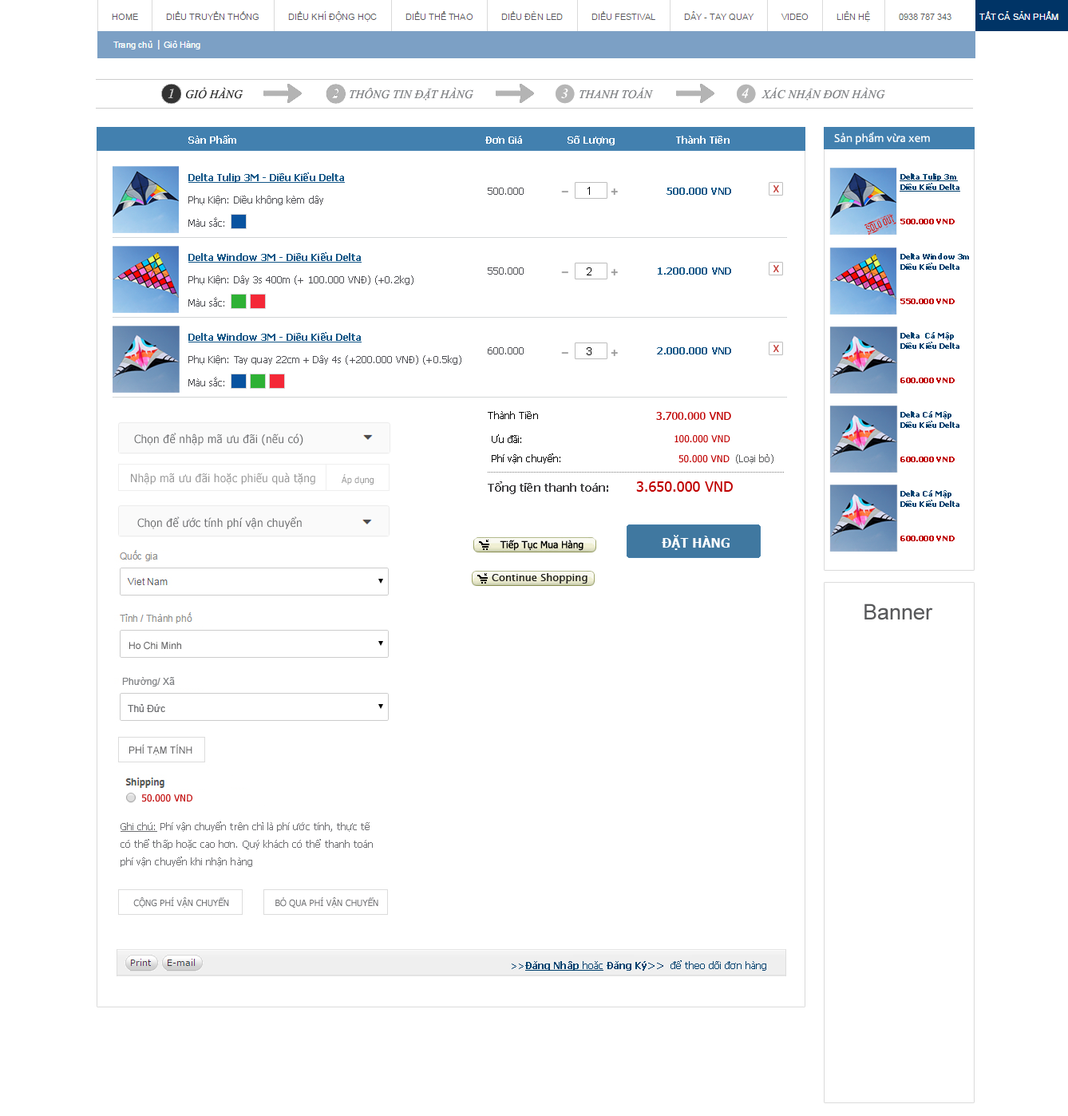
<style>
.page{position:relative;width:1068px;height:1116px;background:#ffffff}
.page>*{position:absolute;margin:0}
.t1{font:12px "TimesNewRomanPS-ItalicMT";letter-spacing:0.005em;color:#333333}
.t2{font:12px "TimesNewRomanPS-ItalicMT";letter-spacing:0.005em;color:#808285}
.t3{font:14.4px "TimesNewRomanPS-ItalicMT";letter-spacing:0.005em;color:#ffffff}
.t4{font:9.6px "Tahoma-Bold";letter-spacing:0.005em;color:#ffffff}
.t5{font:12px "Candara";color:#ffffff}
.t6{font:9.6px "Tahoma-Bold";letter-spacing:0.005em;color:#125687;text-decoration:underline}
.t7{font:8px/10.4px "Tahoma-Bold";letter-spacing:0.005em;color:#00406e;text-decoration:underline}
.t8{font:9.6px "Tahoma";letter-spacing:0.005em;color:#4d4e53}
.t9{font:11.2px "ArialMT";letter-spacing:0.005em;color:#000000}
.t10{font:9.6px "Tahoma-Bold";letter-spacing:0.005em;color:#125687}
.t11{font:8.1px "Tahoma-Bold";letter-spacing:0.005em;color:#bf0000}
.t12{font:8px/10.4px "Tahoma-Bold";letter-spacing:0.005em;color:#00406e}
.t13{font:9.6px "Tahoma";letter-spacing:0.005em;color:#000000}
.t14{font:11.2px "Tahoma";letter-spacing:0.005em;color:#bf0000}
.t15{font:9.6px "Tahoma";letter-spacing:0.005em;color:#bf0000}
.t16{font:9.6px "Tahoma";letter-spacing:0.005em;color:#58595b}
.t17{font:11.2px "Tahoma-Bold";letter-spacing:0.005em;color:#414042}
.t18{font:14.4px "Tahoma";letter-spacing:0.005em;color:#bf0000}
.t19{font:12.8px "Tahoma-Bold";letter-spacing:0.005em;color:#ffffff}
.t20{font:21.3px "ArialMT";letter-spacing:0.005em;color:#58595b}
.t21{font:9.6px/17.6px "Tahoma";letter-spacing:0.005em;color:#6d6e71}
.t22{font:9.6px/17.6px "Tahoma";letter-spacing:0.005em;color:#6d6e71;text-decoration:underline}
.t23{font:8.8px "Tahoma";letter-spacing:0.005em;color:#6d6e71}
.t24{font:9.6px "Tahoma";letter-spacing:0.005em;color:#00406e}
.t25{font:9.6px "Tahoma-Bold";letter-spacing:0.005em;color:#00406e;text-decoration:underline}
.t26{font:9.6px "Tahoma";letter-spacing:0.005em;color:#00406e;text-decoration:underline}
.t27{font:9.6px "Tahoma-Bold";letter-spacing:0.005em;color:#00406e}
</style>
<div class="page">
<p class="t1" style="left:186px;top:87px;width:57px;height:12px">GIỎ HÀNG</p>
<p class="t2" style="left:350px;top:87px;width:123px;height:14px">THÔNG TIN ĐẶT HÀNG</p>
<p class="t2" style="left:580px;top:87px;width:74px;height:12px">THANH TOÁN</p>
<p class="t3" style="left:742px;top:88px;width:7px;height:10px">4</p>
<p class="t2" style="left:761px;top:87px;width:124px;height:14px">XÁC NHẬN ĐƠN HÀNG</p>
<p class="t4" style="left:188px;top:135px;width:48px;height:9px">Sản Phẩm</p>
<p class="t4" style="left:485px;top:136px;width:37px;height:8px">Đơn Giá</p>
<p class="t4" style="left:568px;top:136px;width:47px;height:9px">Số Lượng</p>
<p class="t4" style="left:676px;top:136px;width:54px;height:8px">Thành Tiền</p>
<p class="t5" style="left:834px;top:132px;width:96px;height:13px">Sản phẩm vừa xem</p>
<p class="t6" style="left:188px;top:172px;width:157px;height:11px">Delta Tulip 3M - Diều Kiểu Delta</p>
<p class="t7" style="left:900px;top:173px;width:61px;height:19px">Delta Tulip 3m<br>Diều Kiểu Delta</p>
<p class="t8" style="left:188px;top:196px;width:135px;height:9px">Phụ Kiện: Diều không kèm dây</p>
<p class="t8" style="left:488px;top:188px;width:36px;height:7px">500.000</p>
<p class="t9" style="left:588px;top:187px;width:2px;height:8px">1</p>
<p class="t10" style="left:667px;top:188px;width:64px;height:7px">500.000 VND</p>
<p class="t8" style="left:188px;top:217px;width:36px;height:10px">Màu sắc:</p>
<p class="t11" style="left:901px;top:219px;width:54px;height:5px">500.000 VND</p>
<p class="t6" style="left:188px;top:252px;width:174px;height:11px">Delta Window 3M - Diều Kiểu Delta</p>
<p class="t12" style="left:901px;top:253px;width:68px;height:17px">Delta Window 3m<br>Diều Kiểu Delta</p>
<p class="t8" style="left:488px;top:267px;width:36px;height:8px">550.000</p>
<p class="t9" style="left:587px;top:267px;width:5px;height:8px">2</p>
<p class="t10" style="left:658px;top:267px;width:73px;height:8px">1.200.000 VND</p>
<p class="t8" style="left:188px;top:275px;width:226px;height:10px">Phụ Kiện: Dây 3s 400m (+ 100.000 VNĐ) (+0.2kg)</p>
<p class="t8" style="left:188px;top:297px;width:36px;height:10px">Màu sắc:</p>
<p class="t11" style="left:901px;top:299px;width:54px;height:5px">550.000 VND</p>
<p class="t6" style="left:188px;top:332px;width:174px;height:11px">Delta Window 3M - Diều Kiểu Delta</p>
<p class="t12" style="left:901px;top:332px;width:59px;height:17px">Delta  Cá Mập<br>Diều Kiểu Delta</p>
<p class="t8" style="left:488px;top:347px;width:36px;height:8px">600.000</p>
<p class="t9" style="left:587px;top:347px;width:5px;height:8px">3</p>
<p class="t10" style="left:657px;top:347px;width:74px;height:8px">2.000.000 VND</p>
<p class="t8" style="left:188px;top:355px;width:273px;height:10px">Phụ Kiện: Tay quay 22cm + Dây 4s (+200.000 VNĐ) (+0.5kg)</p>
<p class="t8" style="left:188px;top:377px;width:36px;height:9px">Màu sắc:</p>
<p class="t11" style="left:901px;top:378px;width:54px;height:5px">600.000 VND</p>
<p class="t13" style="left:488px;top:411px;width:50px;height:8px">Thành Tiền</p>
<p class="t14" style="left:656px;top:412px;width:75px;height:8px">3.700.000 VND</p>
<p class="t12" style="left:901px;top:411px;width:59px;height:17px">Delta Cá Mập<br>Diều Kiểu Delta</p>
<p class="t13" style="left:492px;top:434px;width:29px;height:9px">Ưu đãi:</p>
<p class="t15" style="left:675px;top:435px;width:56px;height:8px">100.000 VND</p>
<p class="t13" style="left:492px;top:454px;width:68px;height:10px">Phí vận chuyển:</p>
<p class="t15" style="left:679px;top:455px;width:51px;height:8px">50.000 VND</p>
<p class="t16" style="left:736px;top:454px;width:38px;height:10px">(Loại bỏ)</p>
<p class="t11" style="left:901px;top:457px;width:54px;height:5px">600.000 VND</p>
<p class="t17" style="left:488px;top:481px;width:120px;height:13px">Tổng tiền thanh toán:</p>
<p class="t18" style="left:636px;top:481px;width:97px;height:11px">3.650.000 VND</p>
<p class="t12" style="left:901px;top:490px;width:59px;height:17px">Delta Cá Mập<br>Diều Kiểu Delta</p>
<p class="t19" style="left:662px;top:535px;width:68px;height:15px">ĐẶT HÀNG</p>
<p class="t11" style="left:901px;top:536px;width:54px;height:5px">600.000 VND</p>
<p class="t20" style="left:865px;top:604px;width:68px;height:16px">Banner</p>
<p class="t15" style="left:142px;top:794px;width:50px;height:8px">50.000 VND</p>
<p class="t21" style="left:121px;top:822px;width:252px;height:45px"><span class="t22">Ghi chú:</span> Phí vận chuyển trên chỉ là phí ước tính, thực tế<br>có thể thấp hoặc cao hơn. Quý khách có thể thanh toán<br>phí vận chuyển khi nhận hàng</p>
<p class="t23" style="left:133px;top:897px;width:96px;height:11px">CỘNG PHÍ VẬN CHUYỂN</p>
<p class="t23" style="left:275px;top:897px;width:103px;height:11px">BỎ QUA PHÍ VẬN CHUYỂN</p>
<p class="t24" style="left:512px;top:961px;width:254px;height:10px">&gt;&gt;<span class="t25">Đăng Nhập </span><span class="t26">hoặc </span><span class="t27">Đăng Ký&gt;&gt; </span> để theo dõi đơn hàng</p>
</div>
